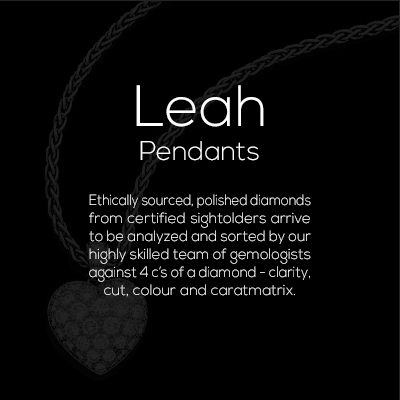
<style>
.page{position:relative;width:400px;height:400px;background:#000000}
.page>*{position:absolute;margin:0}
.t1{font:58px "NexaLight";color:#ffffff}
.t2{font:27px "NexaLight";color:#ffffff}
.t3{font:15px "NexaLight";color:#ffffff}
</style>
<div class="page">
<p class="t1" style="left:136px;top:85px;width:128px;height:42px">Leah</p>
<p class="t2" style="left:140px;top:141px;width:119px;height:20px">Pendants</p>
<p class="t3" style="left:89px;top:194px;width:222px;height:103px;text-align:justify">Ethically sourced, polished diamonds from certified sightolders arrive to be analyzed and sorted by our highly skilled team of gemologists against 4 c’s of a diamond - clarity, cut, colour and caratmatrix.</p>
</div>
